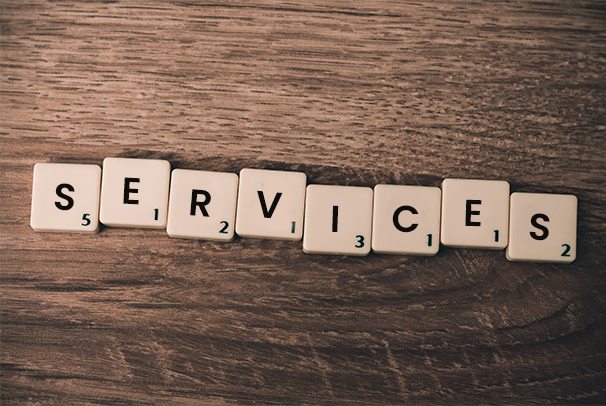
<style>
.page{position:relative;width:606px;height:406px}
.page>*{position:absolute;margin:0}
.t1{font:37.5px "Poppins-SemiBold";letter-spacing:0.001em;color:#0e0d0c;text-transform:uppercase}
</style>
<div class="page">
<p class="t1" style="left:54px;top:183px;width:21px;height:28px;rotate:5deg">s</p>
<p class="t1" style="left:123px;top:177px;width:17px;height:28px;rotate:3deg">e</p>
<p class="t1" style="left:190px;top:189px;width:21px;height:28px;rotate:5deg">r</p>
<p class="t1" style="left:257px;top:190px;width:26px;height:29px;rotate:5deg">v</p>
<p class="t1" style="left:332px;top:205px;width:7px;height:27px;rotate:2deg">i</p>
<p class="t1" style="left:392px;top:205px;width:27px;height:28px">c</p>
<p class="t1" style="left:465px;top:199px;width:17px;height:28px;rotate:2deg">e</p>
<p class="t1" style="left:529px;top:213px;width:21px;height:28px;rotate:5deg">s</p>
</div>
